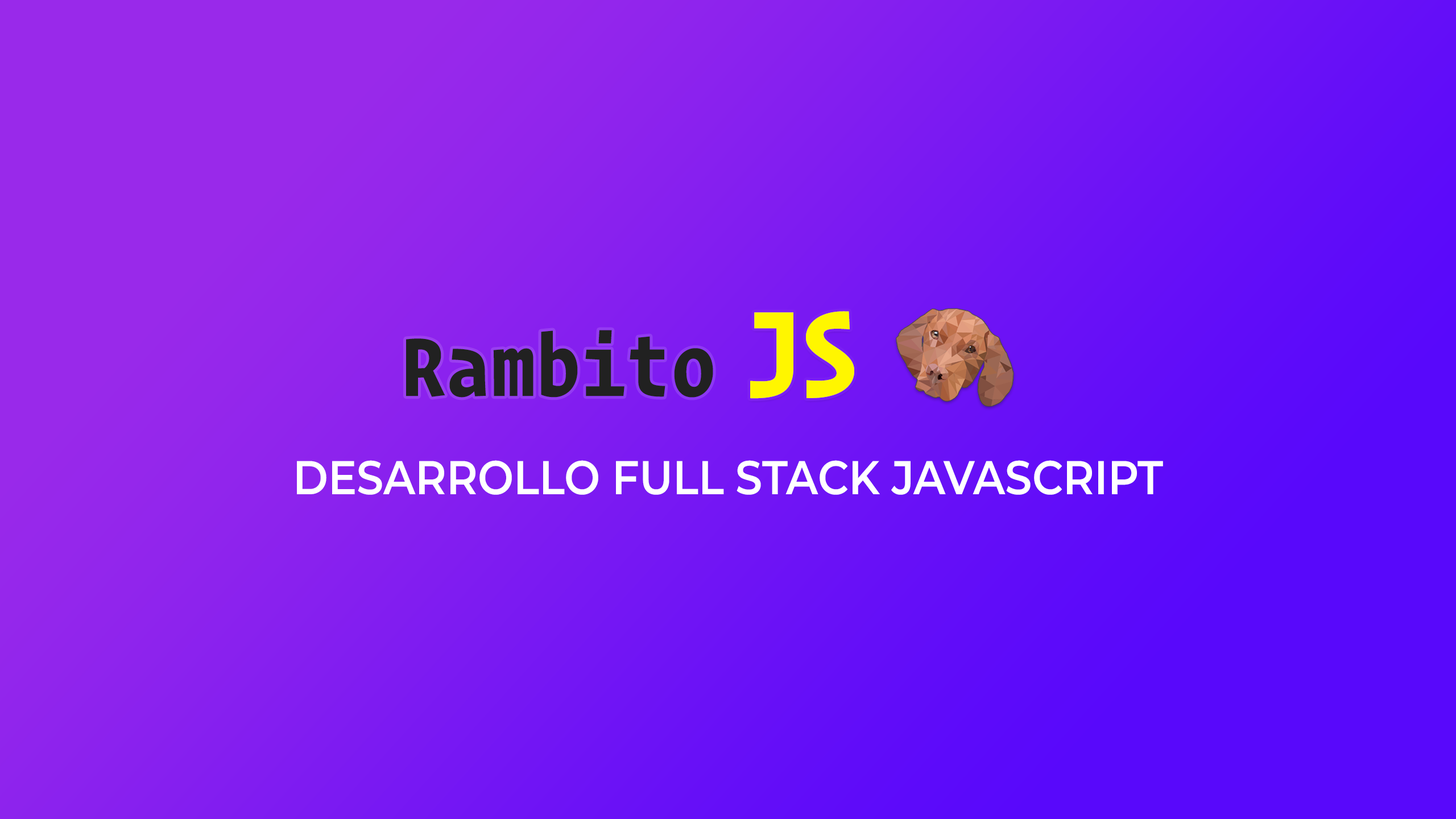
<style>
.page{position:relative;width:1456px;height:819px}
.page>*{position:absolute;margin:0}
.t1{font:136.4px "OperatorMono-Bold";letter-spacing:-0.06em;color:#fff600;scale:0.84 1}
.t2{font:91.1px "OperatorMono-Bold";color:#212121;scale:0.9 1}
.t3{font:47.4px "Montserrat-SemiBold";color:#ffffff;text-transform:uppercase;scale:0.9 1}
</style>
<div class="page">
<p class="t1" style="left:750px;top:311px;width:104px;height:88px">JS</p>
<p class="t2" style="left:406px;top:330px;width:307px;height:68px">Rambito</p>
<p class="t3" style="left:297px;top:460px;width:866px;height:35px">Desarrollo Full Stack Javascript</p>
</div>
